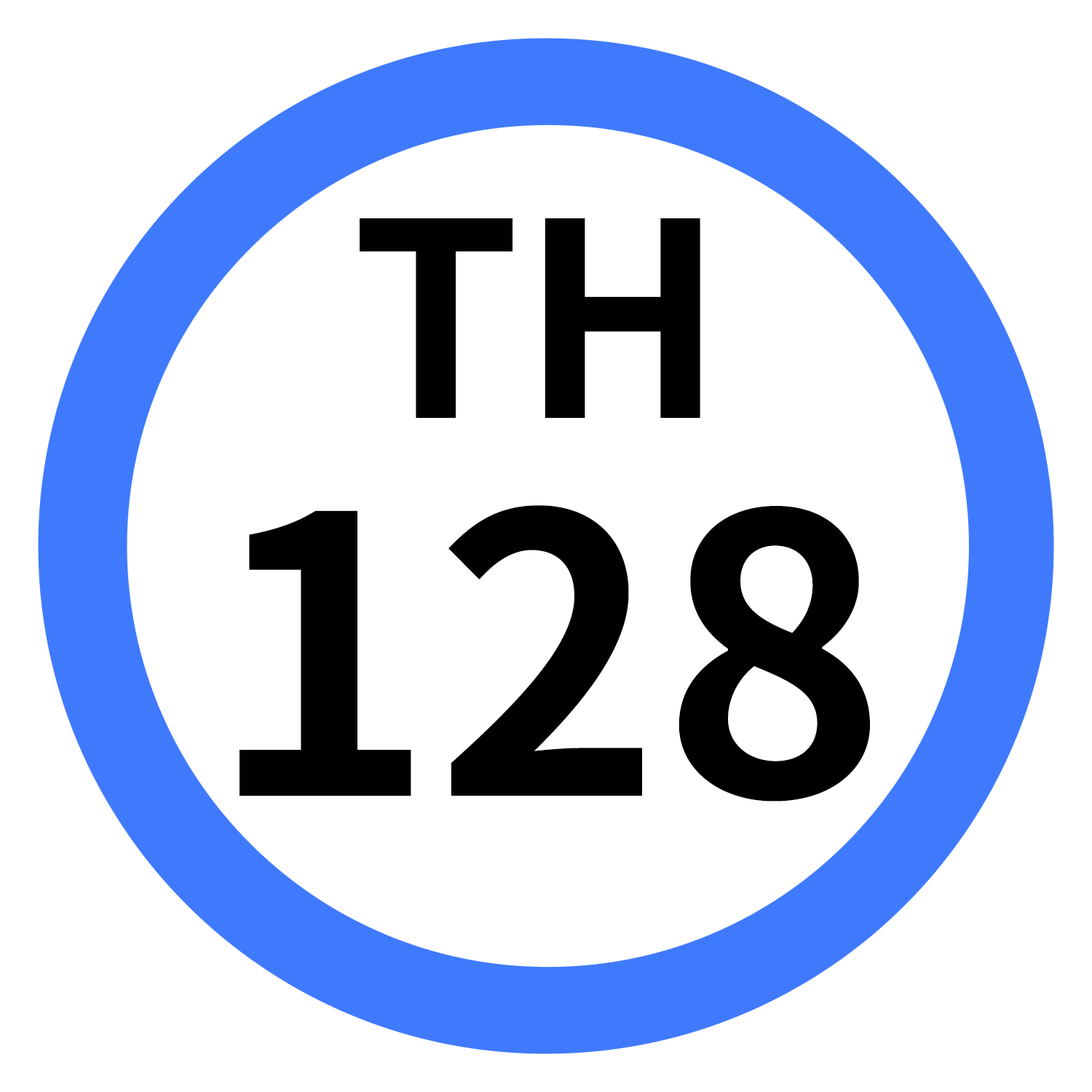
<style>
.page{position:relative;width:1092px;height:1092px;background:#ffffff}
.page>*{position:absolute;margin:0}
.t1{font:269.8px "NotoSansJP-Bold";color:#000000}
.t2{font:384.8px "NotoSansJP-Bold";color:#000000}
</style>
<div class="page">
<p class="t1" style="left:360px;top:218px;width:340px;height:200px">TH</p>
<p class="t2" style="left:240px;top:505px;width:630px;height:297px">128</p>
</div>
